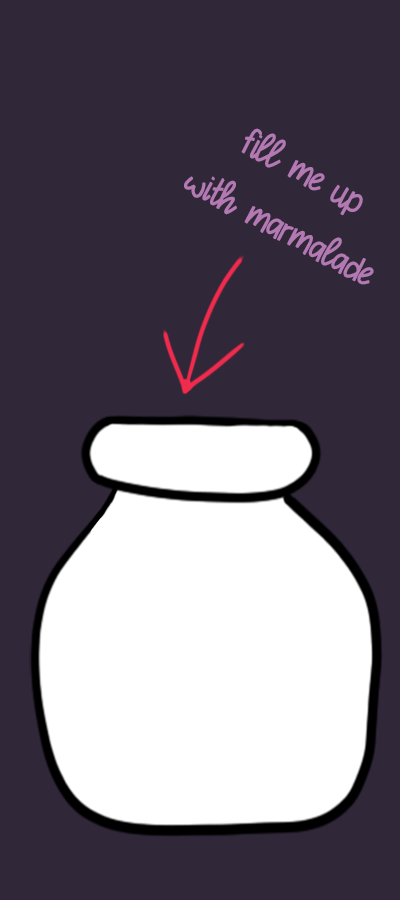
<style>
.page{position:relative;width:400px;height:900px;background:#302739}
.page>*{position:absolute;margin:0}
.t1{font:30px/60px "XOXOGlow-Regular";color:#b379b2}
</style>
<div class="page">
<p class="t1" style="left:184px;top:128px;width:190px;height:157px;text-align:center;rotate:28deg">fill me up <br>with marmalade</p>
</div>
